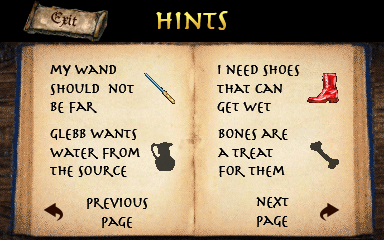
<style>
.page{position:relative;width:384px;height:240px}
.page>*{position:absolute;margin:0}
.t1{font:16px "DucDeBerry";color:#2b0a00}
.t2{font:28px "HerculanumLTW01-Bold"}
.t3{font:14px "HerculanumLTW01-Bold";color:#000000}
</style>
<div class="page">
<p class="t1" style="left:51px;top:10px;width:26px;height:17px;rotate:11deg">Exit</p>
<p class="t2" style="left:156px;top:11px;width:72px;height:19px">hints</p>
<p class="t3" style="left:50px;top:65px;width:84px;height:48px">my wand<br>should  not<br>be far</p>
<p class="t3" style="left:217px;top:65px;width:83px;height:48px">I need shoes<br>that can<br>get wet</p>
<p class="t3" style="left:50px;top:129px;width:90px;height:48px">glebb wants<br>water from<br>the source</p>
<p class="t3" style="left:218px;top:129px;width:70px;height:48px">bones are<br>a treat<br>for them</p>
<p class="t3" style="left:87px;top:198px;width:61px;height:30px;text-align:center">previous<br>page</p>
<p class="t3" style="left:256px;top:197px;width:33px;height:30px">next<br>page</p>
</div>
